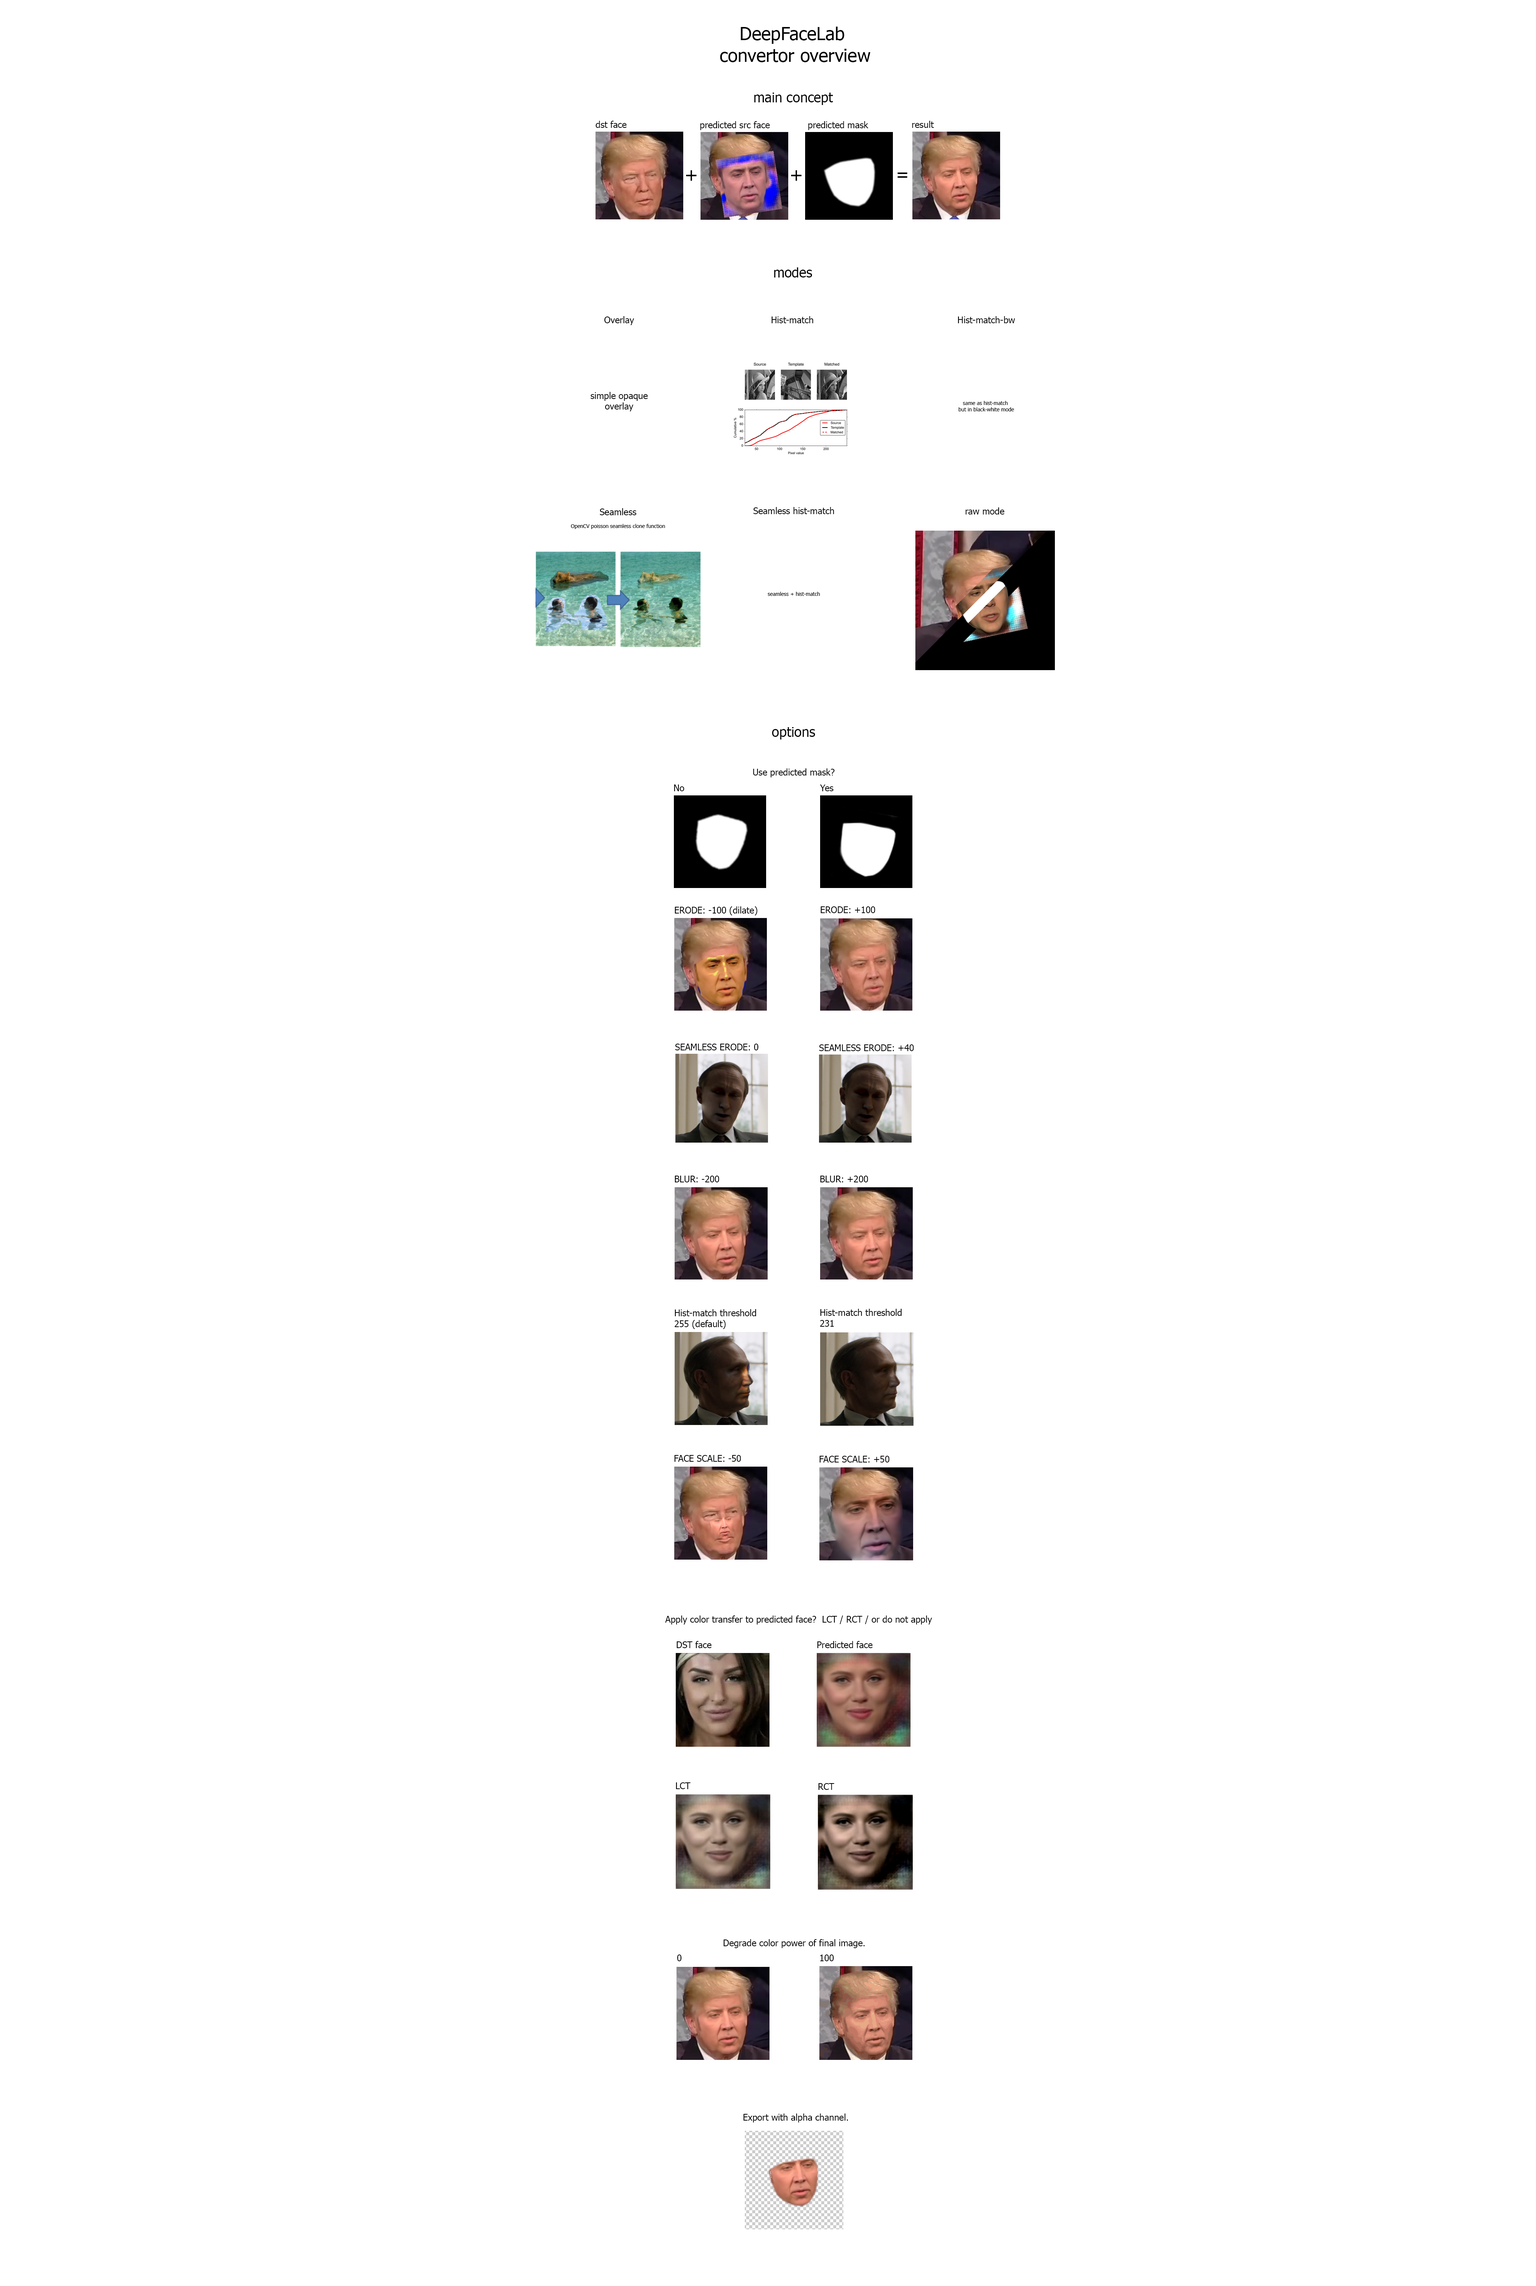
<style>
.page{position:relative;width:1536px;height:2286px;background:#ffffff}
.page>*{position:absolute;margin:0}
.t1{font:18px "Tahoma";color:#000000}
.t2{font:13.5px "Tahoma";color:#000000}
.t3{font:9px "Tahoma";color:#000000}
.t4{font:5.2px "Tahoma";color:#000000}
</style>
<div class="page">
<p class="t1" style="left:720px;top:27px;width:150px;height:35px;text-align:center">DeepFaceLab <br>convertor overview</p>
<p class="t2" style="left:754px;top:93px;width:79px;height:12px">main concept</p>
<p class="t3" style="left:596px;top:121px;width:31px;height:7px">dst face</p>
<p class="t3" style="left:700px;top:121px;width:70px;height:9px">predicted src face</p>
<p class="t3" style="left:808px;top:121px;width:60px;height:9px">predicted mask</p>
<p class="t3" style="left:912px;top:121px;width:22px;height:7px">result</p>
<p class="t1" style="left:686px;top:170px;width:11px;height:11px">+</p>
<p class="t1" style="left:791px;top:170px;width:11px;height:11px">+</p>
<p class="t1" style="left:897px;top:172px;width:11px;height:6px">=</p>
<p class="t2" style="left:774px;top:267px;width:38px;height:11px">modes</p>
<p class="t3" style="left:591px;top:316px;width:57px;height:95px;text-align:center">Overlay<br><br><br><br><br><br><br>simple opaque<br>overlay</p>
<p class="t3" style="left:771px;top:316px;width:42px;height:7px">Hist-match</p>
<p class="t4" style="left:958px;top:316px;width:57px;height:95px;text-align:center"><span class="t3">Hist-match-bw<br></span><br><br><br><br><br><br><br><br><br><br><br><br>same as hist-match <br>but in black-white mode</p>
<p class="t4" style="left:571px;top:508px;width:94px;height:21px;text-align:center"><span class="t3">Seamless<br></span><br>OpenCV poisson seamless clone function</p>
<p class="t4" style="left:753px;top:507px;width:81px;height:89px;text-align:center"><span class="t3">Seamless hist-match<br></span><br><br><br><br><br><br><br><br><br><br><br><br>seamless + hist-match</p>
<p class="t3" style="left:966px;top:507px;width:38px;height:7px">raw mode</p>
<p class="t2" style="left:772px;top:727px;width:43px;height:13px">options</p>
<p class="t3" style="left:753px;top:768px;width:82px;height:9px">Use predicted mask?</p>
<p class="t3" style="left:674px;top:784px;width:10px;height:7px">No</p>
<p class="t3" style="left:820px;top:784px;width:14px;height:7px">Yes</p>
<p class="t3" style="left:675px;top:906px;width:83px;height:9px">ERODE: -100 (dilate)</p>
<p class="t3" style="left:820px;top:906px;width:55px;height:7px">ERODE: +100</p>
<p class="t3" style="left:675px;top:1044px;width:84px;height:6px">SEAMLESS ERODE: 0</p>
<p class="t3" style="left:819px;top:1044px;width:95px;height:7px">SEAMLESS ERODE: +40</p>
<p class="t3" style="left:675px;top:1176px;width:44px;height:6px">BLUR: -200</p>
<p class="t3" style="left:820px;top:1176px;width:48px;height:6px">BLUR: +200</p>
<p class="t3" style="left:675px;top:1309px;width:81px;height:20px;text-align:right">Hist-match threshold <br>255 (default)</p>
<p class="t3" style="left:820px;top:1309px;width:82px;height:18px;text-align:right">Hist-match threshold <br>231</p>
<p class="t3" style="left:674px;top:1455px;width:67px;height:7px">FACE SCALE: -50</p>
<p class="t3" style="left:819px;top:1456px;width:71px;height:6px">FACE SCALE: +50</p>
<p class="t3" style="left:665px;top:1616px;width:267px;height:8px">Apply color transfer to predicted face?  LCT / RCT / or do not apply</p>
<p class="t3" style="left:676px;top:1641px;width:35px;height:7px">DST face</p>
<p class="t3" style="left:817px;top:1641px;width:56px;height:7px">Predicted face</p>
<p class="t3" style="left:676px;top:1782px;width:14px;height:7px">LCT</p>
<p class="t3" style="left:818px;top:1783px;width:16px;height:7px">RCT</p>
<p class="t3" style="left:723px;top:1939px;width:142px;height:9px">Degrade color power of final image.</p>
<p class="t3" style="left:677px;top:1954px;width:5px;height:7px">0</p>
<p class="t3" style="left:820px;top:1954px;width:14px;height:7px">100</p>
<p class="t3" style="left:743px;top:2114px;width:105px;height:8px">Export with alpha channel.</p>
</div>
